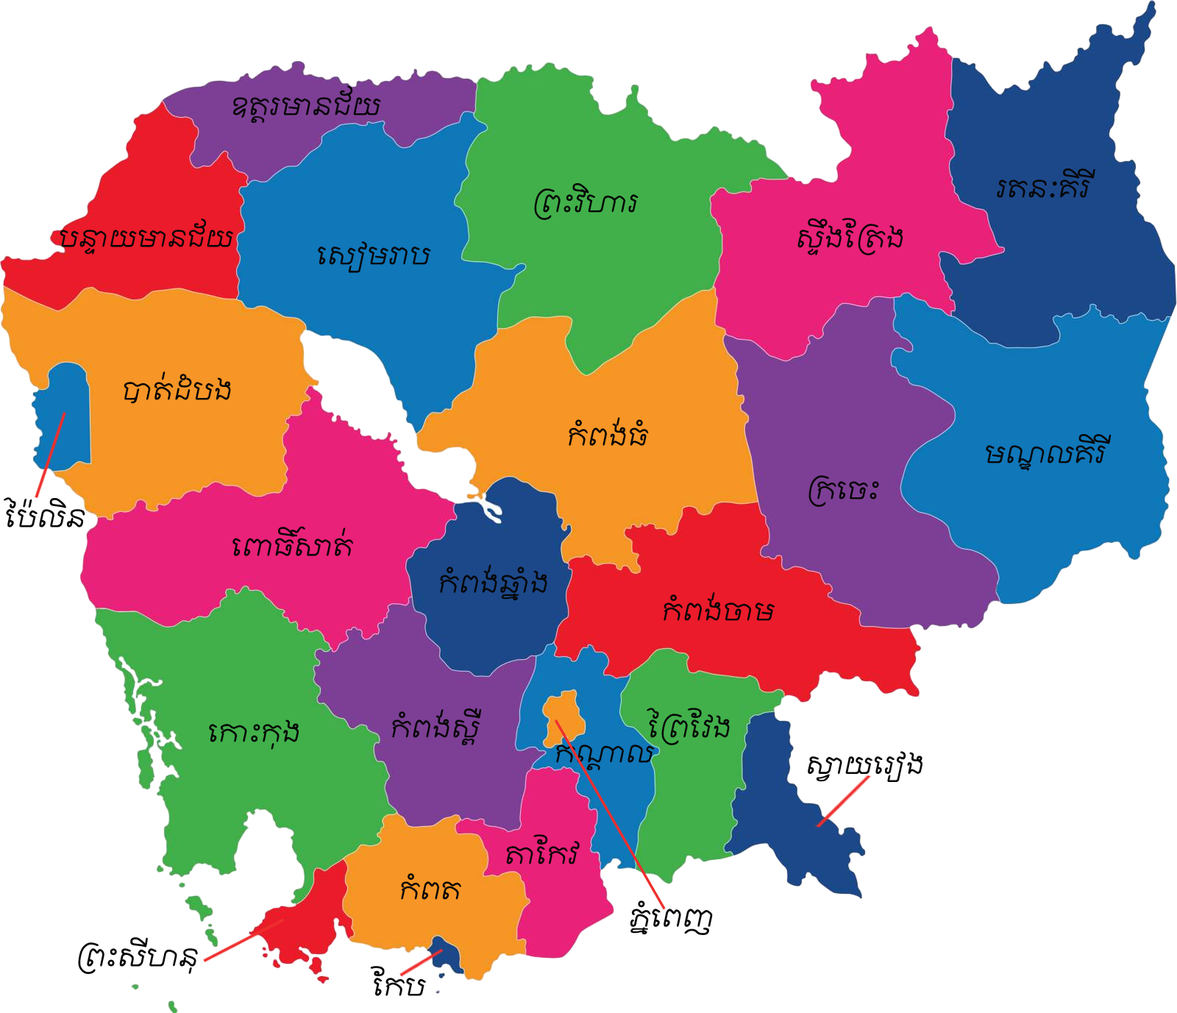
<style>
.page{position:relative;width:1177px;height:1013px;background:#ffffff}
.page>*{position:absolute;margin:0}
.t1{font:24.1px "Kh-Freehand";color:#070707}
.t2{font:23.1px "Kh-Freehand";color:#070707}
.t3{font:23.6px "Kh-Freehand";color:#070707}
</style>
<div class="page">
<p class="t1" style="left:233px;top:85px;width:148px;height:38px">ឧត្តរមានជ័យ</p>
<p class="t1" style="left:997px;top:168px;width:98px;height:30px">រតនៈគិរី</p>
<p class="t1" style="left:534px;top:183px;width:105px;height:37px">ព្រះវិហារ</p>
<p class="t2" style="left:60px;top:218px;width:174px;height:37px">បន្ទាយមានជ័យ</p>
<p class="t1" style="left:797px;top:218px;width:106px;height:37px">ស្ទឹងត្រែង</p>
<p class="t1" style="left:318px;top:241px;width:113px;height:32px">សៀមរាប</p>
<p class="t1" style="left:124px;top:371px;width:107px;height:33px">បាត់ដំបង</p>
<p class="t1" style="left:569px;top:417px;width:80px;height:29px">កំពង់ធំ</p>
<p class="t1" style="left:986px;top:434px;width:126px;height:37px">មណ្ឌលគិរី</p>
<p class="t1" style="left:809px;top:475px;width:70px;height:32px">ក្រចេះ</p>
<p class="t1" style="left:4px;top:497px;width:81px;height:30px">ប៉ៃលិន</p>
<p class="t1" style="left:232px;top:526px;width:122px;height:30px">ពោធិ៍សាត់</p>
<p class="t1" style="left:440px;top:564px;width:107px;height:37px">កំពង់ឆ្នាំង</p>
<p class="t1" style="left:664px;top:591px;width:111px;height:30px">កំពង់ចាម</p>
<p class="t1" style="left:392px;top:708px;width:90px;height:37px">កំពង់ស្ពឺ</p>
<p class="t1" style="left:647px;top:708px;width:83px;height:37px">ព្រៃវែង</p>
<p class="t1" style="left:209px;top:719px;width:90px;height:31px">កោះកុង</p>
<p class="t1" style="left:556px;top:745px;width:99px;height:25px">កណ្ដាល</p>
<p class="t3" style="left:808px;top:751px;width:115px;height:31px">ស្វាយរៀង</p>
<p class="t1" style="left:506px;top:834px;width:74px;height:30px">តាកែវ</p>
<p class="t1" style="left:401px;top:873px;width:60px;height:27px">កំពត</p>
<p class="t1" style="left:630px;top:900px;width:83px;height:35px">ភ្នំពេញ</p>
<p class="t1" style="left:78px;top:937px;width:120px;height:37px">ព្រះសីហនុ</p>
<p class="t1" style="left:370px;top:966px;width:56px;height:30px">កែប</p>
</div>
